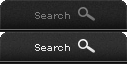
<style>
.page{position:relative;width:127px;height:64px}
.page>*{position:absolute;margin:0}
.t1{font:9px "????ÚçúÒ??????èÊ?ö¼??ÓïÚçõÌ???úÒ";color:#787878}
.t2{font:9px "????ÚçúÒ??????èÊ?ö¼??ÓïÚçõÌ???úÒ";color:#ffffff}
</style>
<div class="page">
<p class="t1" style="left:35px;top:12px;width:35px;height:7px">Search</p>
<p class="t2" style="left:35px;top:44px;width:35px;height:7px">Search</p>
</div>
